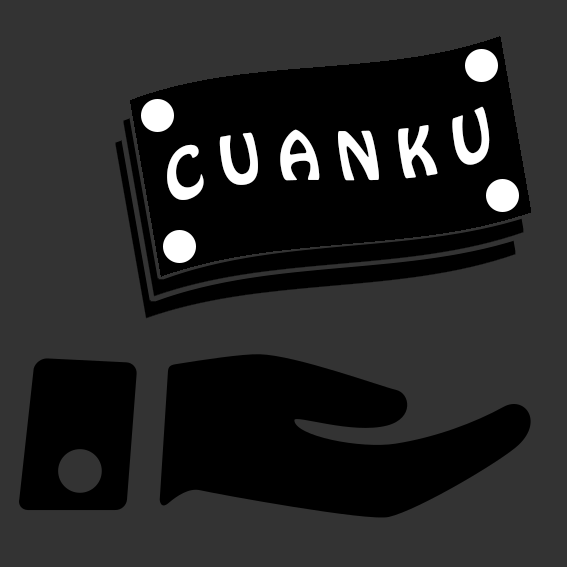
<style>
.page{position:relative;width:567px;height:567px;background:#333333}
.page>*{position:absolute;margin:0}
.t1{font:59.6px "HoboStd";color:#ffffff}
</style>
<div class="page">
<p class="t1" style="left:167px;top:106px;width:323px;height:94px;rotate:-9deg">C U A N K U</p>
</div>
